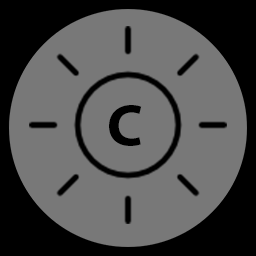
<style>
.page{position:relative;width:256px;height:256px;background:#787878}
.page>*{position:absolute;margin:0}
.t1{font:60px "MyriadPro-Bold";color:#000000}
</style>
<div class="page">
<p class="t1" style="left:109px;top:105px;width:33px;height:41px">C</p>
</div>
